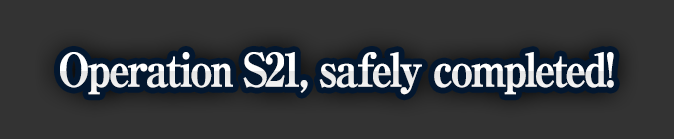
<style>
.page{position:relative;width:674px;height:139px;background:#333333}
.page>*{position:absolute;margin:0}
.t1{font:46px "RyuminPro-ExBold";letter-spacing:-0.08em;color:#ffffff;font-weight:bold;scale:0.9 1}
</style>
<div class="page">
<p class="t1" style="left:60px;top:52px;width:554px;height:43px">Operation S21, safely completed!</p>
</div>
